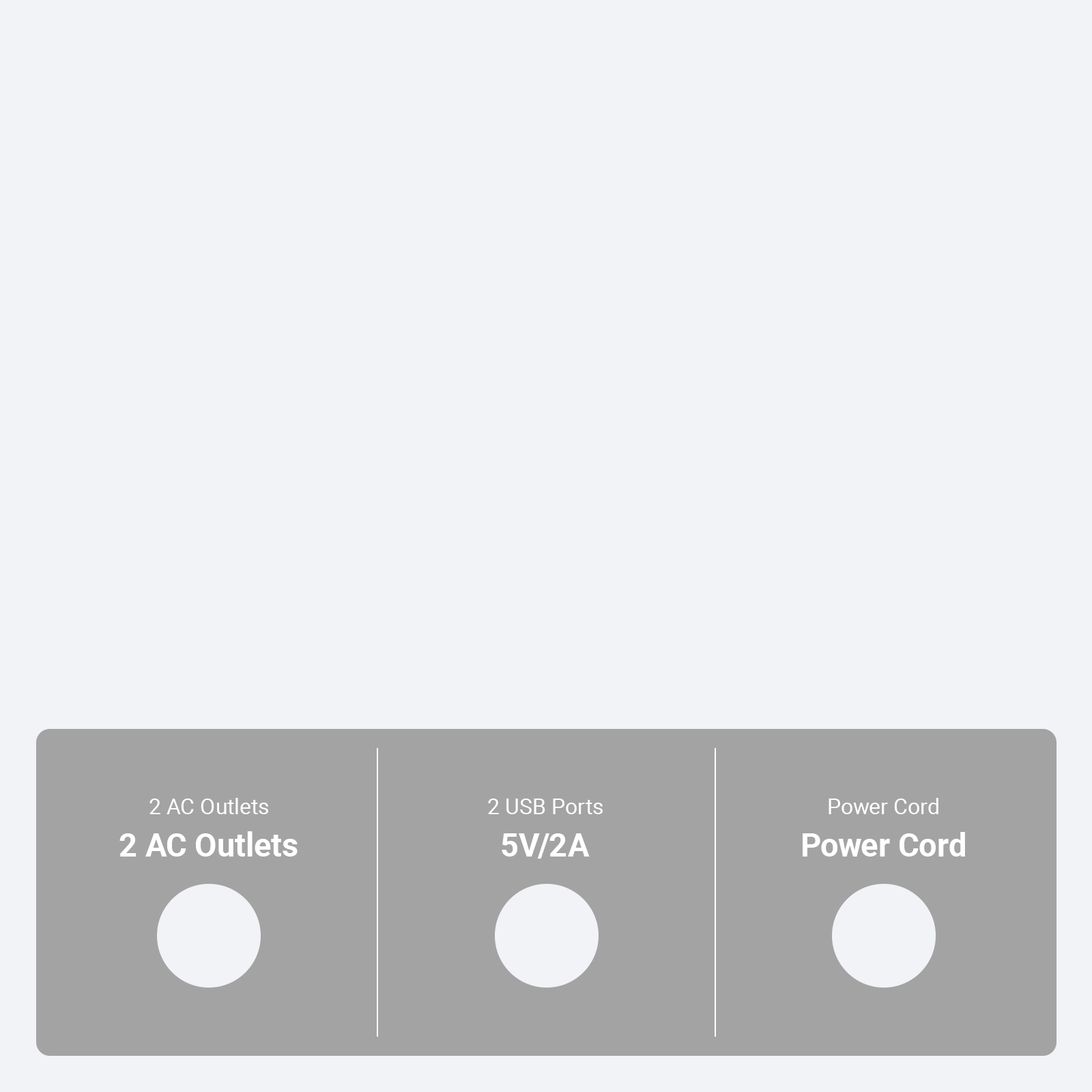
<style>
.page{position:relative;width:1092px;height:1092px;background:#f2f3f6}
.page>*{position:absolute;margin:0}
.t1{font:22px "Roboto-Regular";color:#ffffff}
.t2{font:32.6px "Roboto-Bold";color:#ffffff}
</style>
<div class="page">
<p class="t1" style="left:149px;top:798px;width:119px;height:16px">2 AC Outlets</p>
<p class="t1" style="left:829px;top:798px;width:109px;height:16px">Power Cord</p>
<p class="t1" style="left:488px;top:799px;width:115px;height:15px">2 USB Ports</p>
<p class="t2" style="left:119px;top:831px;width:179px;height:26px">2 AC Outlets</p>
<p class="t2" style="left:502px;top:833px;width:88px;height:26px">5V/2A</p>
<p class="t2" style="left:803px;top:832px;width:162px;height:25px">Power Cord</p>
</div>
